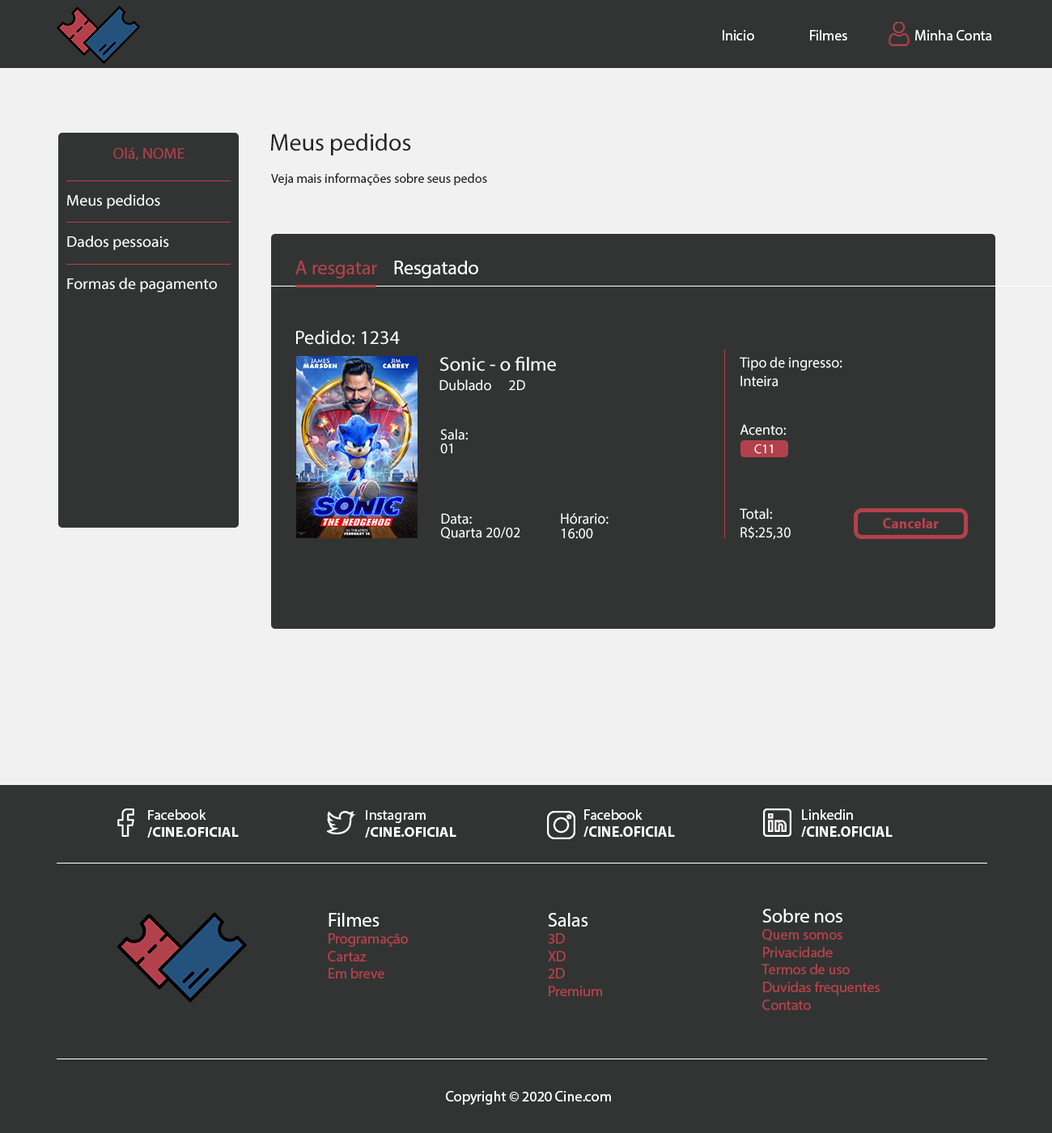
<style>
.page{position:relative;width:1052px;height:1133px;background:#323433}
.page>*{position:absolute;margin:0}
.t1{font:14.6px "MyriadPro-Regular";color:#ffffff}
.t2{font:24.3px "MyriadPro-Regular";color:#212529}
.t3{font:15.6px "MyriadPro-Regular";color:#b3414b}
.t4{font:13px "MyriadPro-Regular";color:#212529}
.t5{font:15.6px/20.8px "MyriadPro-Regular";color:#ffffff}
.t6{font:19.4px "MyriadPro-Regular";color:#b3414b}
.t7{font:19.4px "MyriadPro-Regular";color:#ffffff}
.t8{font:19.4px "MyriadPro-Regular";color:#feffff}
.t9{font:14.9px "MyriadPro-Regular";color:#ffffff}
.t10{font:13px "MyriadPro-Regular";color:#ffffff}
.t11{font:14.6px "MyriadPro-Bold";color:#b4434d}
.t12{font:14.4px "MyriadPro-Bold";color:#ffffff}
.t13{font:14.4px "MyriadPro-Regular";color:#ffffff}
.t14{font:14.6px "MyriadPro-Bold";color:#ffffff}
.t15{font:14.6px "MyriadPro-Regular";color:#b3414b}
</style>
<div class="page">
<p class="t1" style="left:723px;top:30px;width:269px;height:10px">Inicio  Filmes        Minha Conta</p>
<p class="t2" style="left:270px;top:133px;width:141px;height:22px">Meus pedidos</p>
<p class="t3" style="left:113px;top:147px;width:72px;height:14px">Olá, NOME</p>
<p class="t4" style="left:271px;top:173px;width:216px;height:12px">Veja mais informações sobre seus pedos</p>
<p class="t5" style="left:67px;top:194px;width:150px;height:98px">Meus pedidos<br><br>Dados pessoais<br><br>Formas de pagamento</p>
<p class="t6" style="left:295px;top:261px;width:82px;height:17px">A resgatar</p>
<p class="t7" style="left:394px;top:261px;width:84px;height:17px">Resgatado</p>
<p class="t8" style="left:296px;top:330px;width:104px;height:15px">Pedido: 1234</p>
<p class="t7" style="left:440px;top:356px;width:116px;height:16px">Sonic - o filme</p>
<p class="t1" style="left:740px;top:357px;width:103px;height:14px">Tipo de ingresso:</p>
<p class="t9" style="left:741px;top:376px;width:38px;height:11px">Inteira</p>
<p class="t1" style="left:440px;top:380px;width:51px;height:11px">Dublado</p>
<p class="t1" style="left:509px;top:380px;width:16px;height:10px">2D</p>
<p class="t1" style="left:740px;top:424px;width:46px;height:11px">Acento:</p>
<p class="t1" style="left:440px;top:429px;width:28px;height:11px">Sala:</p>
<p class="t1" style="left:440px;top:444px;width:12px;height:10px">01</p>
<p class="t10" style="left:754px;top:444px;width:19px;height:10px">C11</p>
<p class="t1" style="left:740px;top:508px;width:32px;height:12px">Total:</p>
<p class="t1" style="left:441px;top:513px;width:31px;height:12px">Data:</p>
<p class="t9" style="left:561px;top:513px;width:48px;height:12px">Hórario:</p>
<p class="t11" style="left:883px;top:518px;width:56px;height:11px">Cancelar</p>
<p class="t1" style="left:441px;top:527px;width:79px;height:12px">Quarta 20/02</p>
<p class="t1" style="left:562px;top:529px;width:31px;height:10px">16:00</p>
<p class="t9" style="left:741px;top:526px;width:50px;height:14px">R$:25,30</p>
<p class="t12" style="left:147px;top:809px;width:92px;height:29px"><span class="t13">Facebook<br></span>/CINE.OFICIAL</p>
<p class="t14" style="left:584px;top:809px;width:91px;height:28px"><span class="t1">Facebook<br></span>/CINE.OFICIAL</p>
<p class="t14" style="left:801px;top:809px;width:92px;height:28px"><span class="t1">Linkedin<br></span>/CINE.OFICIAL</p>
<p class="t12" style="left:365px;top:810px;width:92px;height:28px"><span class="t13">Instagram<br></span>/CINE.OFICIAL</p>
<p class="t15" style="left:328px;top:913px;width:80px;height:66px"><span class="t7">Filmes<br></span>Programação<br>Cartaz<br>Em breve</p>
<p class="t15" style="left:548px;top:913px;width:54px;height:83px"><span class="t7">Salas<br></span>3D<br>XD<br>2D<br>Premium</p>
<p class="t15" style="left:762px;top:909px;width:118px;height:101px"><span class="t7">Sobre nos<br></span>Quem somos<br>Privacidade<br>Termos de uso<br>Duvidas frequentes<br>Contato</p>
<p class="t1" style="left:446px;top:1091px;width:165px;height:14px">Copyright © 2020 Cine.com</p>
</div>
